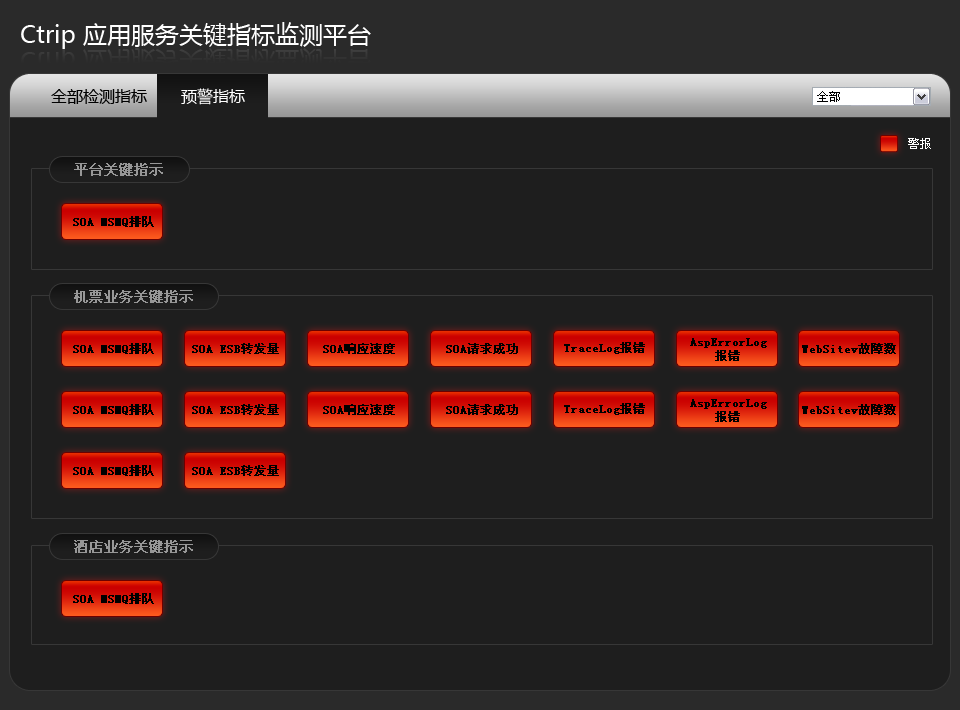
<style>
.page{position:relative;width:960px;height:710px;background:#1e1e1e}
.page>*{position:absolute;margin:0}
.t1{font:24px "MicrosoftYaHei";color:#ffffff}
.t2{font:16px "MicrosoftYaHei";color:#000000}
.t3{font:16px "MicrosoftYaHei";color:#ffffff}
.t4{font:12.2px "SimSun";color:#000000}
.t5{font:12.1px "SimSun";color:#ffffff}
.t6{font:14.1px "SimSun";color:#979797;font-weight:bold}
.t7{font:12.2px "SimSun";color:#000000;font-weight:bold}
.t8{font:12.4px "SimSun";color:#000000;font-weight:bold}
</style>
<div class="page">
<p class="t1" style="left:21px;top:22px;width:350px;height:27px">Ctrip 应用服务关键指标监测平台</p>
<p class="t2" style="left:51px;top:89px;width:96px;height:15px">全部检测指标</p>
<p class="t3" style="left:181px;top:88px;width:64px;height:17px">预警指标</p>
<p class="t3" style="left:181px;top:88px;width:64px;height:17px">预警指标</p>
<p class="t4" style="left:817px;top:91px;width:23px;height:11px">全部</p>
<p class="t5" style="left:908px;top:138px;width:23px;height:11px">警报</p>
<p class="t6" style="left:74px;top:163px;width:89px;height:13px">平台关键指示</p>
<p class="t7" style="left:73px;top:216px;width:81px;height:11px">SOA MSMQ排队</p>
<p class="t6" style="left:74px;top:290px;width:119px;height:13px">机票业务关键指示</p>
<p class="t7" style="left:564px;top:342px;width:81px;height:12px">TraceLog报错</p>
<p class="t7" style="left:690px;top:338px;width:77px;height:23px;text-align:center">AspErrorLog<br>报错</p>
<p class="t7" style="left:73px;top:343px;width:81px;height:11px">SOA MSMQ排队</p>
<p class="t8" style="left:192px;top:343px;width:87px;height:11px">SOA ESB转发量</p>
<p class="t7" style="left:323px;top:343px;width:72px;height:11px">SOA响应速度</p>
<p class="t7" style="left:446px;top:343px;width:72px;height:11px">SOA请求成功</p>
<p class="t7" style="left:802px;top:343px;width:94px;height:11px">WebSitev故障数</p>
<p class="t7" style="left:690px;top:399px;width:77px;height:23px;text-align:center">AspErrorLog<br>报错</p>
<p class="t7" style="left:73px;top:404px;width:81px;height:11px">SOA MSMQ排队</p>
<p class="t8" style="left:192px;top:404px;width:87px;height:11px">SOA ESB转发量</p>
<p class="t7" style="left:323px;top:404px;width:72px;height:11px">SOA响应速度</p>
<p class="t7" style="left:446px;top:404px;width:72px;height:11px">SOA请求成功</p>
<p class="t7" style="left:564px;top:403px;width:81px;height:12px">TraceLog报错</p>
<p class="t7" style="left:802px;top:404px;width:94px;height:11px">WebSitev故障数</p>
<p class="t7" style="left:73px;top:465px;width:81px;height:11px">SOA MSMQ排队</p>
<p class="t8" style="left:192px;top:465px;width:87px;height:11px">SOA ESB转发量</p>
<p class="t6" style="left:74px;top:540px;width:119px;height:13px">酒店业务关键指示</p>
<p class="t7" style="left:73px;top:593px;width:81px;height:11px">SOA MSMQ排队</p>
</div>
